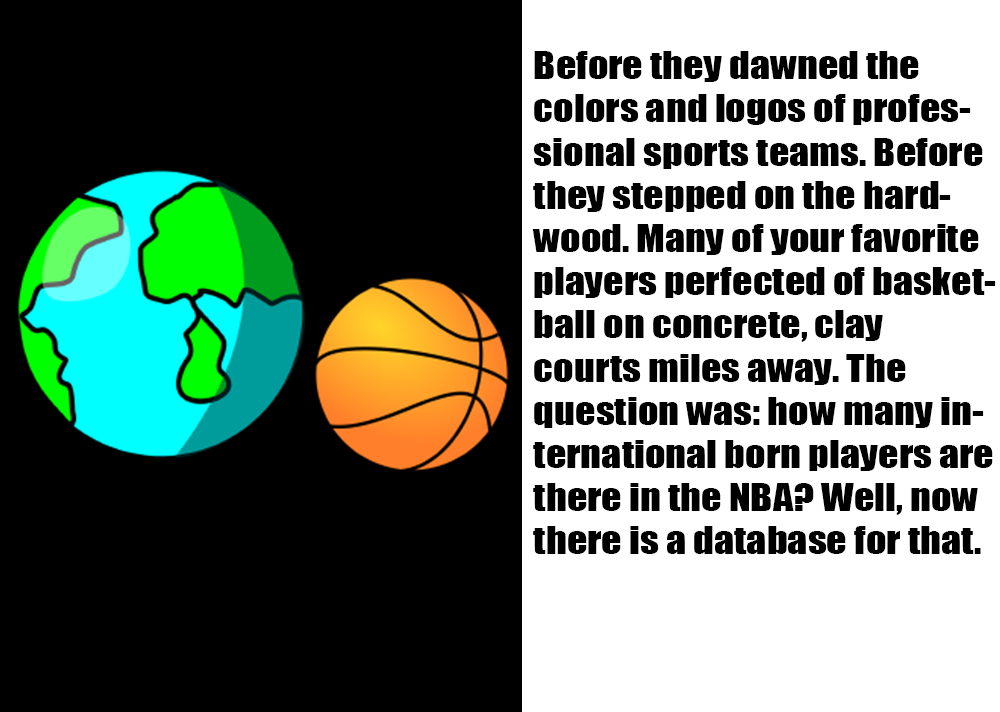
<style>
.page{position:relative;width:1000px;height:712px;background:#000000}
.page>*{position:absolute;margin:0}
.t1{font:36px "Impact";color:#000000;scale:1.11 1}
.t2{font:14px "Impact";color:#000000;scale:1.11 1}
</style>
<div class="page">
<p class="t1" style="left:532px;top:51px;width:464px;height:503px;text-align:center"><span class="t2"><br><br></span>Before they dawned the colors and logos of professional sports teams. Before they stepped on the hardwood. Many of your favorite players perfected of basketball on concrete, clay courts miles away. The question was: how many international born players are there in the NBA? Well, now there is a database for that.</p>
</div>
